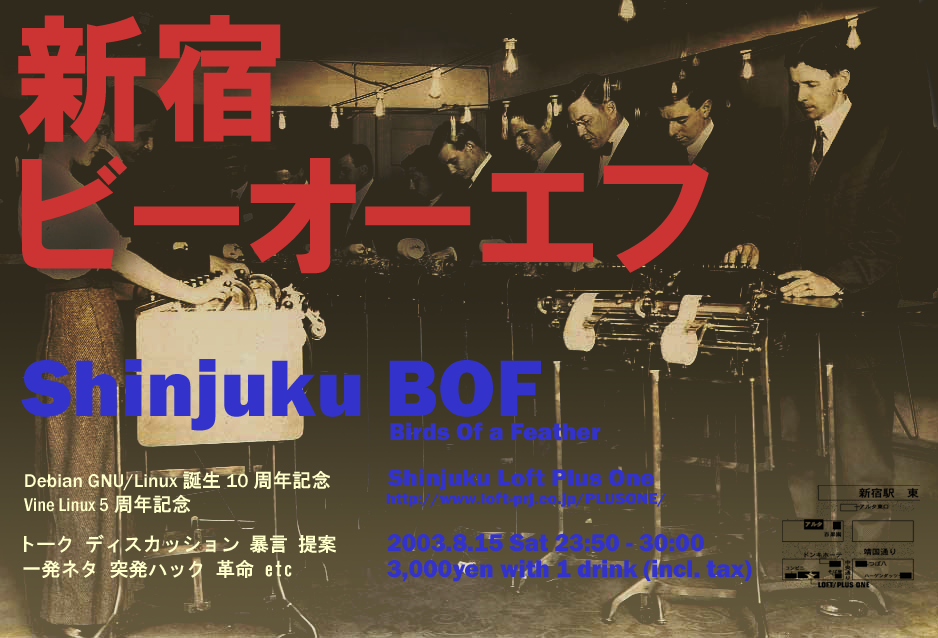
<style>
.page{position:relative;width:938px;height:638px;background:#2f2a1c}
.page>*{position:absolute;margin:0}
.t1{font:138.4px "HGPSoeiKakugothicUB";color:#cc3333}
.t2{font:83px "FranklinGothic-Heavy";color:#3333cc}
.t3{font:24.9px "FranklinGothic-Heavy";color:#3333cc}
.t4{font:19.4px "FranklinGothic-Medium";color:#ffffcc}
.t5{font:19.4px "HGGothicE";color:#ffffcc}
.t6{font:19.4px "FranklinGothic-MediumCond";color:#ffffcc}
.t7{font:16.6px "FranklinGothic-Heavy";color:#3333cc}
</style>
<div class="page">
<p class="t1" style="left:18px;top:15px;width:263px;height:128px">新宿</p>
<p class="t1" style="left:22px;top:155px;width:687px;height:119px">ビーオーエフ</p>
<p class="t2" style="left:21px;top:359px;width:520px;height:72px">Shinjuku BOF</p>
<p class="t3" style="left:390px;top:422px;width:211px;height:19px">Birds Of a Feather</p>
<p class="t4" style="left:25px;top:470px;width:305px;height:21px">Debian GNU/Linux<span class="t5">誕生</span>10<span class="t5">周年記念</span></p>
<p class="t3" style="left:387px;top:468px;width:267px;height:23px">Shinjuku Loft Plus One</p>
<p class="t6" style="left:24px;top:494px;width:167px;height:19px">Vine Linux 5<span class="t5">周年記念</span></p>
<p class="t7" style="left:386px;top:492px;width:280px;height:15px">http://www.loft-prj.co.jp/PLUSONE/</p>
<p class="t5" style="left:24px;top:534px;width:312px;height:19px">トーク ディスカッション 暴言 提案</p>
<p class="t3" style="left:387px;top:534px;width:317px;height:18px">2003.8.15 Sat 23:50 - 30:00</p>
<p class="t5" style="left:23px;top:559px;width:269px;height:19px">一発ネタ 突発ハック 革命 etc</p>
<p class="t3" style="left:387px;top:559px;width:365px;height:23px">3,000yen with 1 drink (incl. tax)</p>
</div>
